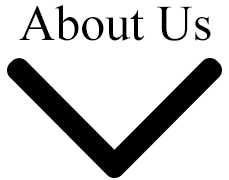
<style>
.page{position:relative;width:229px;height:180px;background:#ffffff}
.page>*{position:absolute;margin:0}
.t1{font:50px "TimesNewRomanPSMT";color:#000000}
</style>
<div class="page">
<p class="t1" style="left:19px;top:5px;width:192px;height:36px">About Us</p>
</div>
